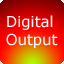
<style>
.page{position:relative;width:64px;height:64px}
.page>*{position:absolute;margin:0}
.t1{font:14.9px "Verdana";color:#ffffff}
</style>
<div class="page">
<p class="t1" style="left:6px;top:15px;width:52px;height:33px">Digital<br>Output</p>
</div>
